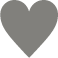
<style>
.page{position:relative;width:58px;height:58px;background:#81807c}
.page>*{position:absolute;margin:0}
.t1{font:72px "KozGoPr6N-Regular";color:#81807c}
</style>
<div class="page">
<p class="t1" style="left:0px;top:0px;width:58px;height:58px">♥</p>
</div>
